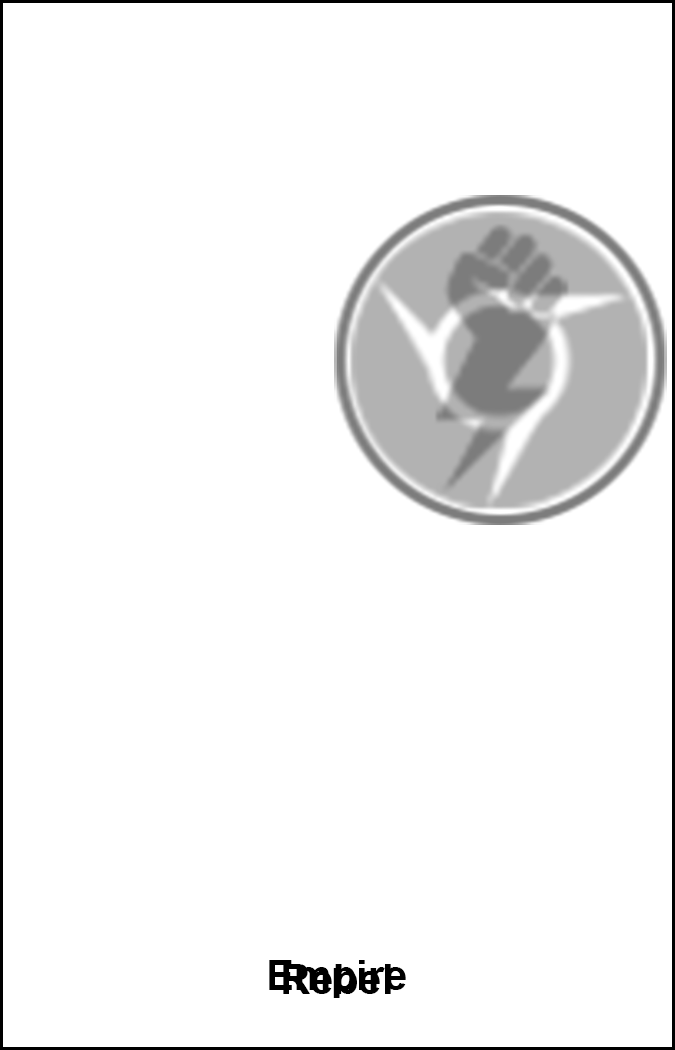
<style>
.page{position:relative;width:675px;height:1050px;background:#ffffff}
.page>*{position:absolute;margin:0}
.t1{font:41.7px "Arial-BoldMT";color:#000000}
</style>
<div class="page">
<p class="t1" style="left:269px;top:960px;width:137px;height:38px">Empire</p>
<p class="t1" style="left:283px;top:964px;width:108px;height:30px">Rebel</p>
</div>
